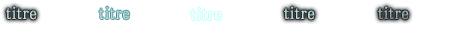
<style>
.page{position:relative;width:465px;height:29px;background:#ffffff}
.page>*{position:absolute;margin:0}
.t1{font:18.1px "MS-PMincho";letter-spacing:0.03em;color:#bfe0e1;font-weight:bold;scale:0.84 1}
.t2{font:18.1px "MS-PMincho";letter-spacing:0.03em;color:#99acb3;font-weight:bold;scale:0.84 1}
</style>
<div class="page">
<p class="t1" style="left:6px;top:6px;width:31px;height:14px">titre</p>
<p class="t1" style="left:284px;top:6px;width:31px;height:14px">titre</p>
<p class="t2" style="left:378px;top:6px;width:31px;height:14px">titre</p>
</div>
